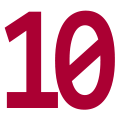
<style>
.page{position:relative;width:120px;height:120px;background:#ffffff}
.page>*{position:absolute;margin:0}
.t1{font:150px "Consolas-Bold";letter-spacing:-0.1em;color:#ab0033;scale:0.8 1}
</style>
<div class="page">
<p class="t1" style="left:4px;top:10px;width:111px;height:100px">10</p>
</div>
